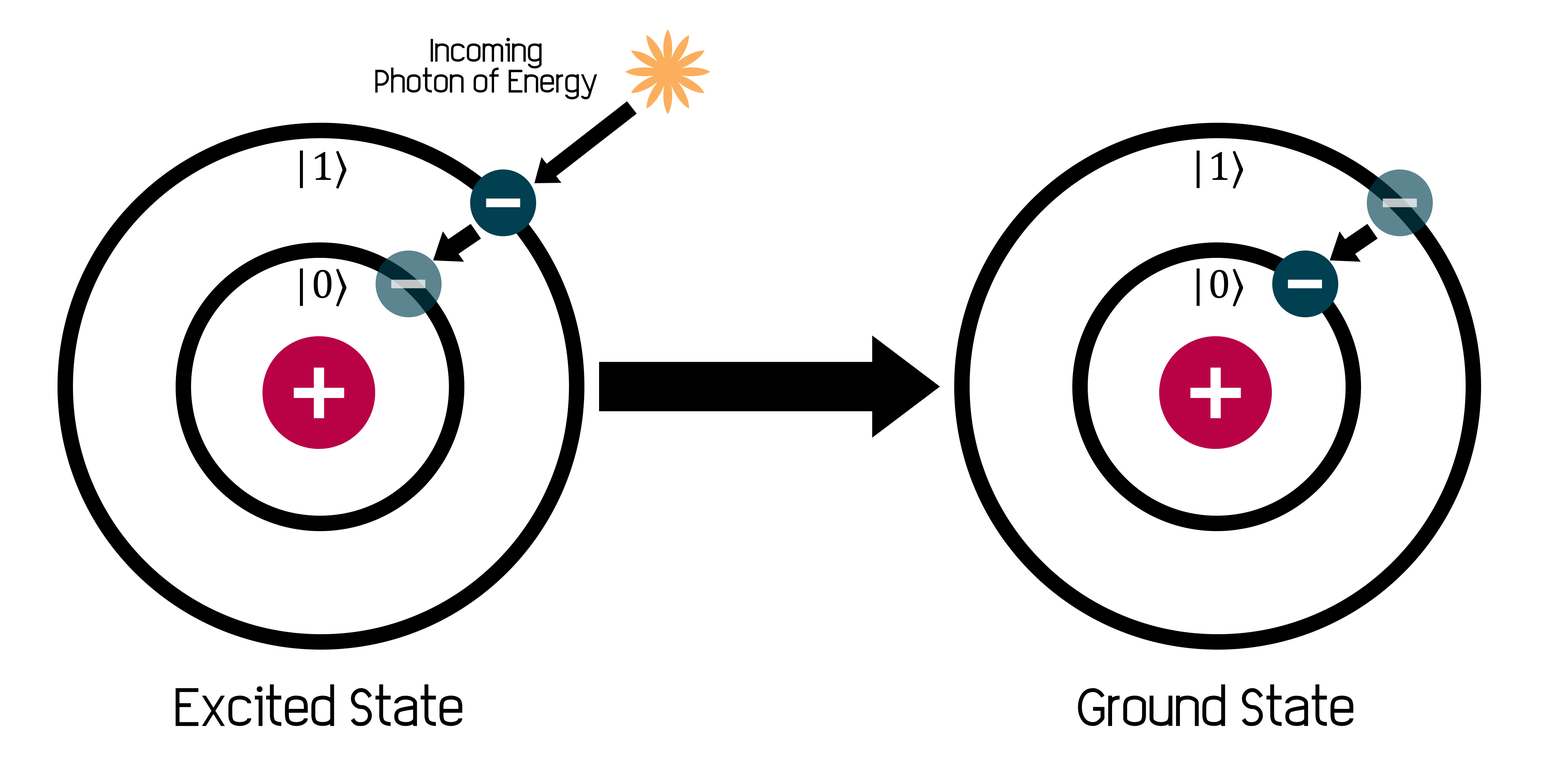
<style>
.page{position:relative;width:1544px;height:772px;background:#ffffff}
.page>*{position:absolute;margin:0}
.t1{font:23.2px/30.9px "EleganTech";color:#000000}
.t2{font:41.3px "Cambria";color:#000000}
.t3{font:41.3px "SitkaSmall-Italic";color:#000000}
.t4{font:86.6px "EleganTech";color:#ffffff}
.t5{font:86.6px "EleganTech"}
.t6{font:86.6px "EleganTech";color:#bfc5c6}
.t7{font:103.1px "EleganTech";color:#ffffff}
.t8{font:38.6px "EleganTech";color:#000000}
</style>
<div class="page">
<p class="t1" style="left:375px;top:38px;width:222px;height:62px;text-align:center">Incoming<br>Photon of Energy</p>
<p class="t2" style="left:300px;top:151px;width:47px;height:38px"><span class="t3">|</span>1⟩</p>
<p class="t2" style="left:1197px;top:151px;width:47px;height:38px"><span class="t3">|</span>1⟩</p>
<p class="t4" style="left:486px;top:198px;width:34px;height:9px">-</p>
<p class="t5" style="left:1383px;top:198px;width:34px;height:9px">-</p>
<p class="t2" style="left:300px;top:268px;width:47px;height:39px"><span class="t3">|</span>0⟩</p>
<p class="t2" style="left:1197px;top:268px;width:47px;height:39px"><span class="t3">|</span>0⟩</p>
<p class="t6" style="left:391px;top:280px;width:34px;height:8px">-</p>
<p class="t4" style="left:1288px;top:280px;width:34px;height:8px">-</p>
<p class="t7" style="left:294px;top:368px;width:50px;height:51px">+</p>
<p class="t7" style="left:1191px;top:368px;width:50px;height:51px">+</p>
<p class="t8" style="left:176px;top:685px;width:287px;height:41px">Excited State</p>
<p class="t8" style="left:1078px;top:685px;width:276px;height:41px">Ground State</p>
</div>
